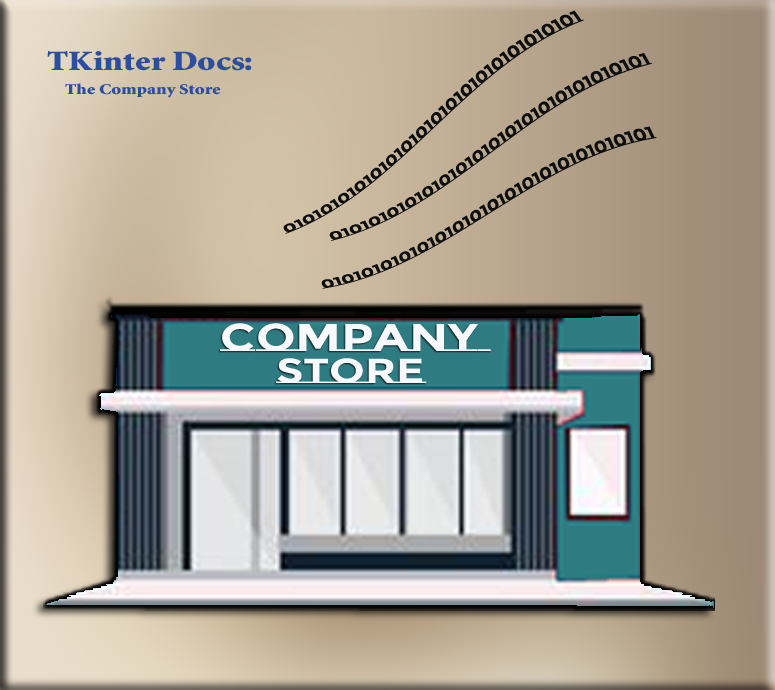
<style>
.page{position:relative;width:775px;height:690px}
.page>*{position:absolute;margin:0}
.t1{font:15px "MontserratSubrayada-Bold";color:#0d0e0e;scale:1.24 1}
.t2{font:28px "MinionStd-Black";color:#2c4e9d;scale:1.24 1}
.t3{font:15px "MinionStd-Black";color:#2c4e9d;scale:1.24 1}
.t4{font:38.6px "MontserratSubrayada-Bold";color:#f8f9fc;scale:1.24 1}
.t5{font:34.8px "MontserratSubrayada-Bold";color:#f8f9fc;scale:1.24 1}
</style>
<div class="page">
<p class="t1" style="left:283px;top:10px;width:301px;height:224px;rotate:-36deg">010101010101010101010101010101010101</p>
<p class="t2" style="left:47px;top:51px;width:205px;height:20px">TKinter Docs:</p>
<p class="t1" style="left:329px;top:53px;width:323px;height:188px;rotate:-29deg">010101010101010101010101010101010101</p>
<p class="t3" style="left:65px;top:83px;width:156px;height:15px">The Company Store</p>
<p class="t1" style="left:321px;top:126px;width:336px;height:163px;rotate:-25deg">010101010101010101010101010101010101</p>
<p class="t4" style="left:220px;top:323px;width:271px;height:28px">Company</p>
<p class="t5" style="left:276px;top:358px;width:151px;height:25px">Store</p>
</div>
